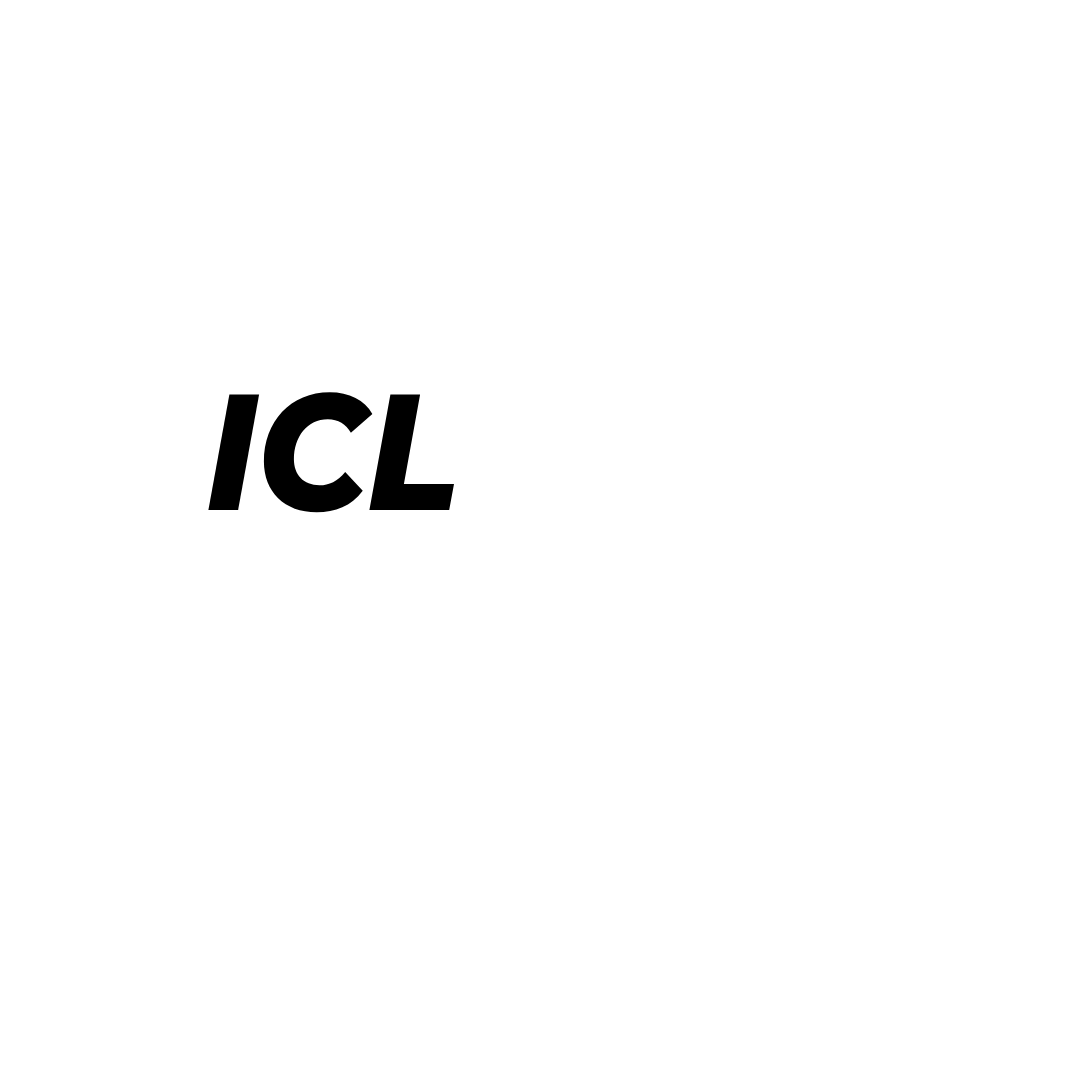
<style>
.page{position:relative;width:1080px;height:1080px;background:#ffffff}
.page>*{position:absolute;margin:0}
.t1{font:165px "Montserrat-ExtraBoldItalic";color:#000000;scale:0.91 1}
</style>
<div class="page">
<p class="t1" style="left:208px;top:392px;width:246px;height:121px">ICL</p>
</div>
